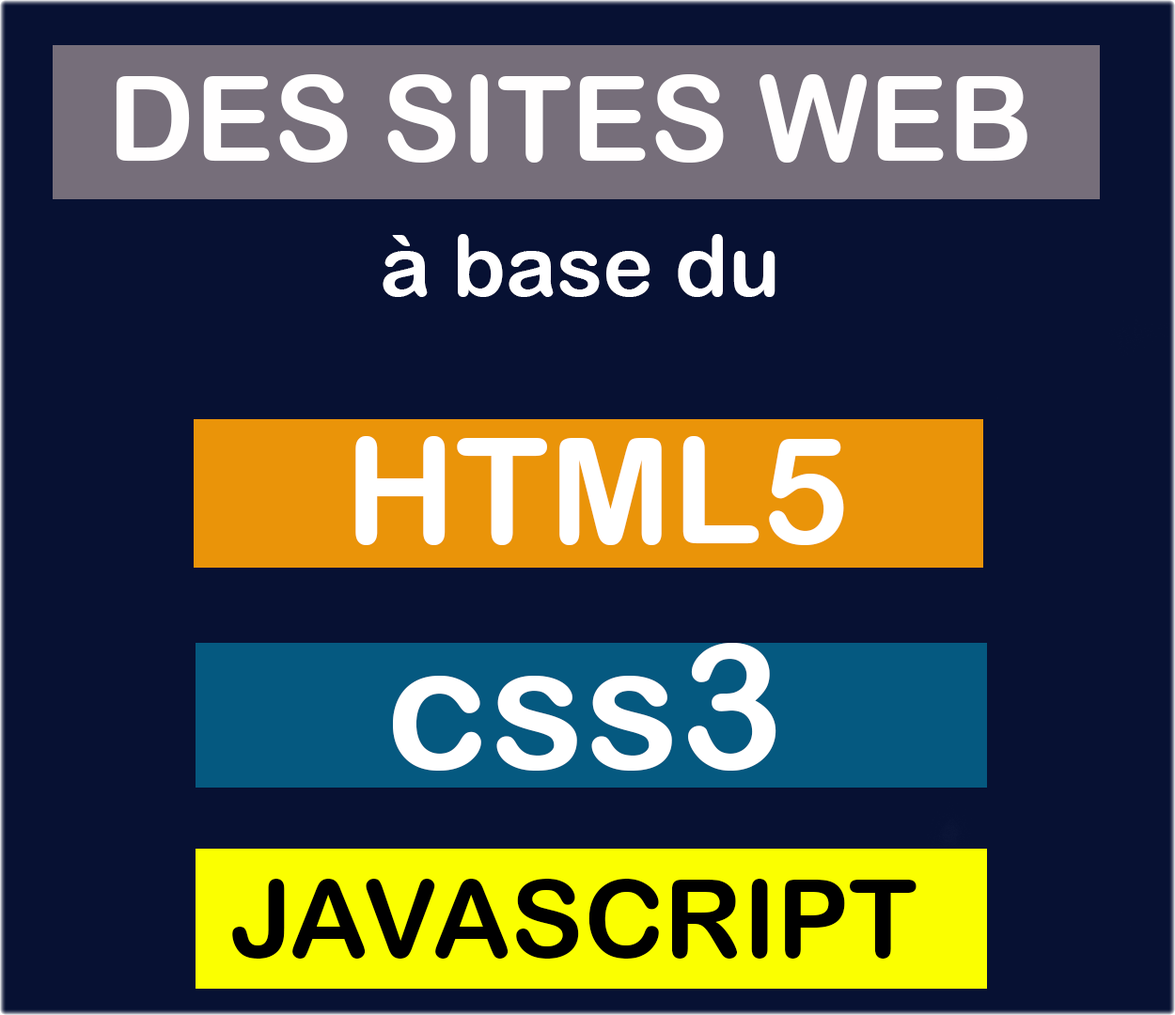
<style>
.page{position:relative;width:1175px;height:1015px;background:#071133}
.page>*{position:absolute;margin:0}
.t1{font:118px "ArialRoundedMTBold";color:#fffefe}
.t2{font:85.5px "ArialRoundedMTBold";color:#ffffff}
.t3{font:147.8px "ArialRoundedMTBold";color:#ffffff}
.t4{font:175.2px "ArialRoundedMTBold";color:#ffffff}
.t5{font:109px "ArialRoundedMTBold";color:#000000}
</style>
<div class="page">
<p class="t1" style="left:116px;top:74px;width:911px;height:89px">DES SITES WEB</p>
<p class="t2" style="left:383px;top:234px;width:392px;height:63px">à base du</p>
<p class="t3" style="left:355px;top:436px;width:489px;height:109px">HTML5</p>
<p class="t4" style="left:393px;top:643px;width:383px;height:128px">css3</p>
<p class="t5" style="left:232px;top:879px;width:684px;height:80px">JAVASCRIPT</p>
</div>
